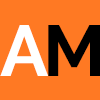
<style>
.page{position:relative;width:100px;height:100px;background:#ff7923}
.page>*{position:absolute;margin:0}
.t1{font:72px "Raleway-Bold";color:#ffffff}
.t2{font:72px "Raleway-Bold";color:#000000}
</style>
<div class="page">
<p class="t1" style="left:0px;top:25px;width:48px;height:51px">A</p>
<p class="t2" style="left:48px;top:25px;width:52px;height:51px">M</p>
</div>
